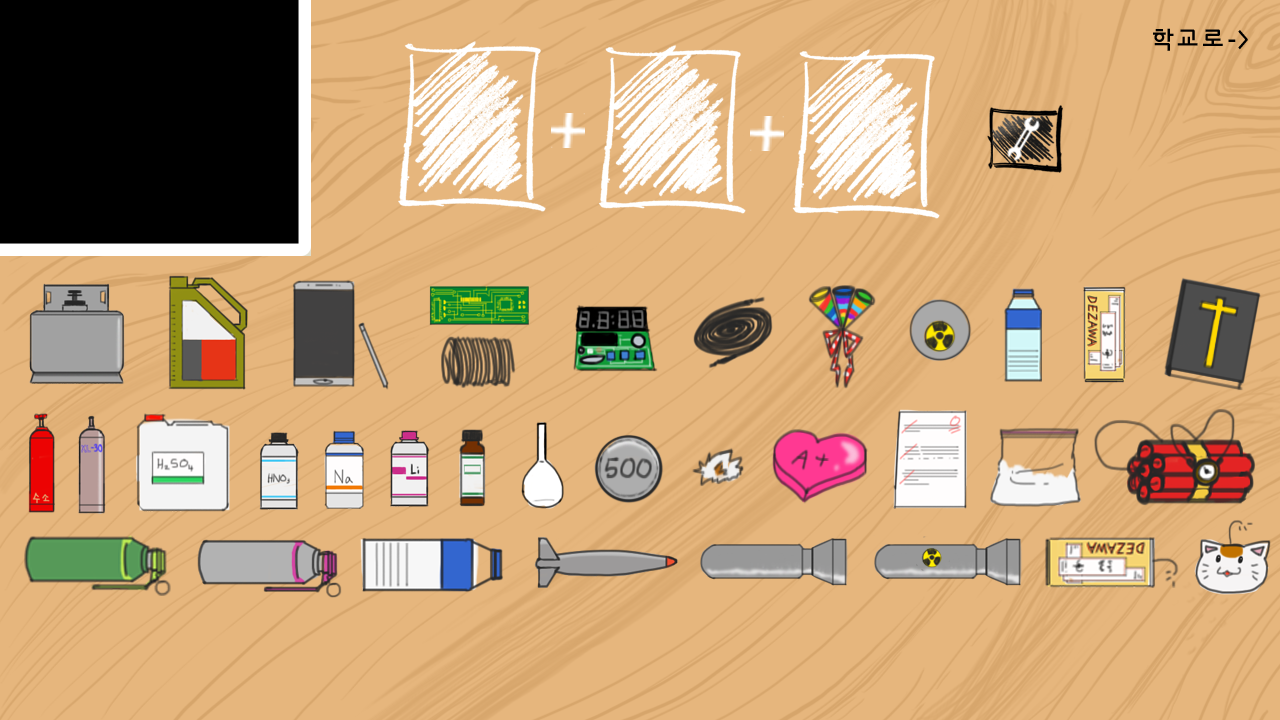
<style>
.page{position:relative;width:1280px;height:720px;background:#e6b67d}
.page>*{position:absolute;margin:0}
.t1{font:25px "HYkanB";color:#000000}
</style>
<div class="page">
<p class="t1" style="left:1153px;top:28px;width:95px;height:23px">학교로-&gt;</p>
</div>
